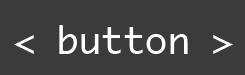
<style>
.page{position:relative;width:245px;height:75px;background:#3b3b3b}
.page>*{position:absolute;margin:0}
.t1{font:36.8px "Monaco";color:#ffffff}
</style>
<div class="page">
<p class="t1" style="left:14px;top:25px;width:219px;height:29px">&lt; button &gt;</p>
</div>
